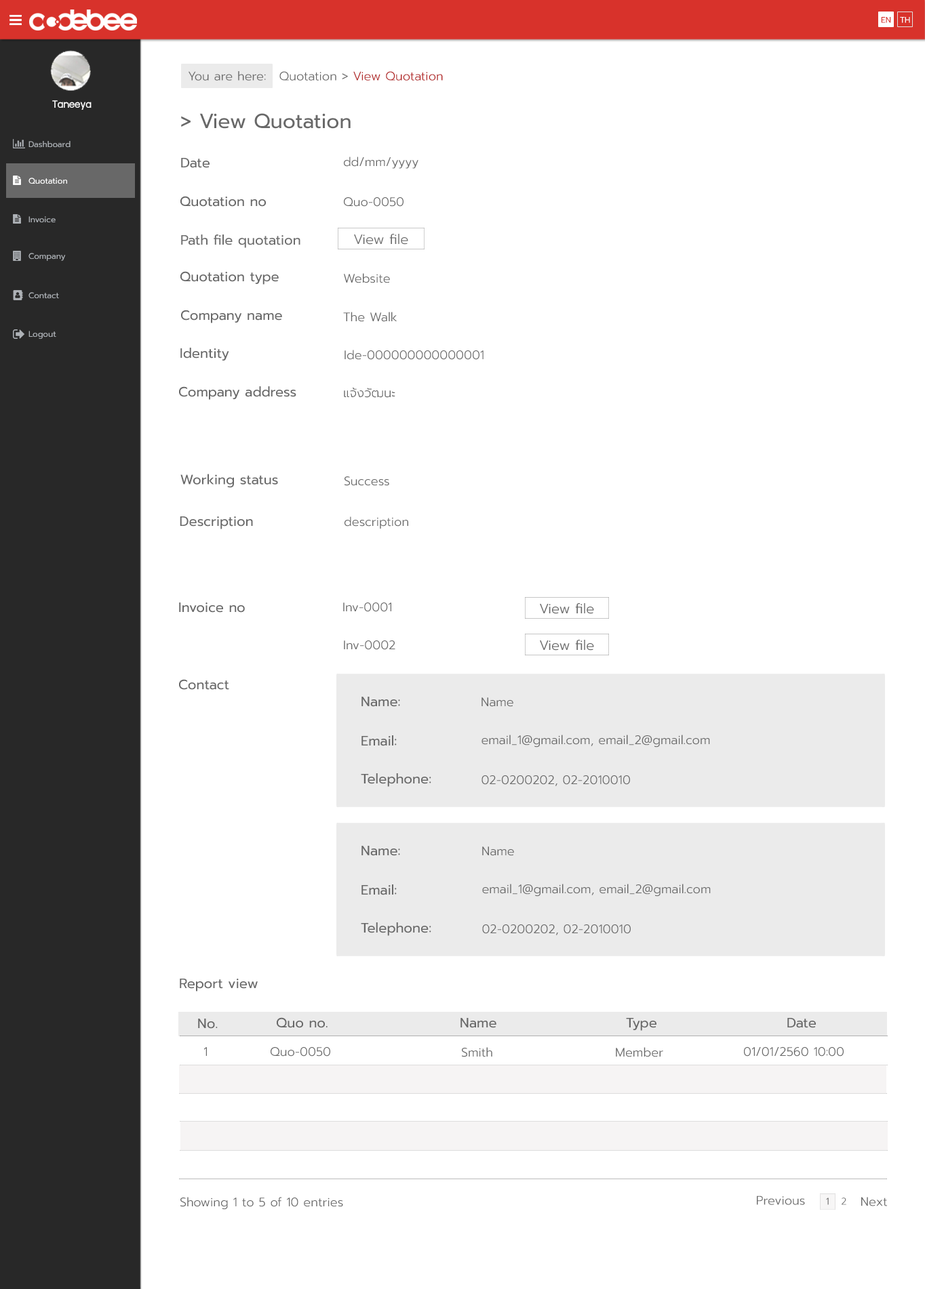
<style>
.page{position:relative;width:925px;height:1289px;background:#ffffff}
.page>*{position:absolute;margin:0}
.t1{font:8.1px "Prompt-Regular";color:#d8322b}
.t2{font:8.1px "Prompt-Regular";color:#ffffff}
.t3{font:12.2px "Prompt-Light";color:#686868}
.t4{font:12.2px "Prompt-Light";color:#b22121}
.t5{font:12.2px "supermarket";color:#ffffff}
.t6{font:20.3px "Prompt-Regular";color:#686868}
.t7{font:8.1px "Prompt-Regular";color:#aeb2b7}
.t8{font:13.6px "Prompt-Regular";color:#686868}
.t9{font:13.6px "Prompt-Light";color:#686868}
.t10{font:9.5px "Prompt-Light";color:#686868}
</style>
<div class="page">
<p class="t1" style="left:881px;top:17px;width:10px;height:6px">EN</p>
<p class="t2" style="left:900px;top:17px;width:10px;height:6px">TH</p>
<p class="t3" style="left:188px;top:71px;width:78px;height:10px">You are here:</p>
<p class="t4" style="left:279px;top:71px;width:164px;height:10px"><span class="t3">Quotation &gt; </span>View Quotation</p>
<p class="t5" style="left:52px;top:100px;width:40px;height:10px">Taneeya</p>
<p class="t6" style="left:181px;top:113px;width:170px;height:16px">&gt; View Quotation</p>
<p class="t7" style="left:28px;top:141px;width:43px;height:7px">Dashboard</p>
<p class="t8" style="left:181px;top:158px;width:28px;height:10px">Date</p>
<p class="t3" style="left:344px;top:157px;width:74px;height:12px">dd/mm/yyyy</p>
<p class="t2" style="left:28px;top:178px;width:39px;height:6px">Quotation</p>
<p class="t8" style="left:180px;top:196px;width:86px;height:11px">Quotation no</p>
<p class="t3" style="left:344px;top:197px;width:59px;height:10px">Quo-0050</p>
<p class="t7" style="left:28px;top:216px;width:28px;height:7px">Invoice</p>
<p class="t9" style="left:354px;top:234px;width:54px;height:11px">View file</p>
<p class="t8" style="left:181px;top:235px;width:119px;height:13px">Path file quotation</p>
<p class="t7" style="left:28px;top:253px;width:38px;height:8px">Company</p>
<p class="t8" style="left:180px;top:271px;width:99px;height:14px">Quotation type</p>
<p class="t3" style="left:344px;top:273px;width:46px;height:10px">Website</p>
<p class="t7" style="left:28px;top:292px;width:31px;height:7px">Contact</p>
<p class="t8" style="left:181px;top:310px;width:101px;height:13px">Company name</p>
<p class="t3" style="left:343px;top:312px;width:54px;height:10px">The Walk</p>
<p class="t7" style="left:28px;top:331px;width:28px;height:8px">Logout</p>
<p class="t8" style="left:180px;top:348px;width:49px;height:13px">Identity</p>
<p class="t3" style="left:344px;top:350px;width:139px;height:10px">Ide-000000000000001</p>
<p class="t8" style="left:179px;top:386px;width:117px;height:14px">Company address</p>
<p class="t3" style="left:344px;top:388px;width:51px;height:10px">แจ้งวัฒนะ</p>
<p class="t8" style="left:180px;top:474px;width:98px;height:14px">Working status</p>
<p class="t3" style="left:344px;top:477px;width:45px;height:9px">Success</p>
<p class="t8" style="left:180px;top:517px;width:73px;height:12px">Description</p>
<p class="t3" style="left:344px;top:517px;width:64px;height:12px">description</p>
<p class="t8" style="left:179px;top:603px;width:66px;height:10px">Invoice no</p>
<p class="t3" style="left:343px;top:603px;width:48px;height:9px">Inv-0001</p>
<p class="t9" style="left:540px;top:603px;width:54px;height:11px">View file</p>
<p class="t3" style="left:344px;top:641px;width:51px;height:9px">Inv-0002</p>
<p class="t9" style="left:540px;top:640px;width:54px;height:11px">View file</p>
<p class="t8" style="left:179px;top:679px;width:50px;height:11px">Contact</p>
<p class="t8" style="left:361px;top:697px;width:39px;height:10px">Name:</p>
<p class="t3" style="left:481px;top:698px;width:32px;height:9px">Name</p>
<p class="t8" style="left:361px;top:736px;width:36px;height:10px">Email:</p>
<p class="t3" style="left:481px;top:735px;width:229px;height:13px">email_1@gmail.com, email_2@gmail.com</p>
<p class="t8" style="left:361px;top:774px;width:70px;height:13px">Telephone:</p>
<p class="t3" style="left:481px;top:776px;width:149px;height:10px">02-0200202, 02-2010010</p>
<p class="t8" style="left:361px;top:846px;width:39px;height:10px">Name:</p>
<p class="t3" style="left:482px;top:847px;width:32px;height:9px">Name</p>
<p class="t8" style="left:361px;top:885px;width:36px;height:11px">Email:</p>
<p class="t3" style="left:482px;top:884px;width:229px;height:13px">email_1@gmail.com, email_2@gmail.com</p>
<p class="t8" style="left:361px;top:923px;width:70px;height:13px">Telephone:</p>
<p class="t3" style="left:482px;top:925px;width:149px;height:11px">02-0200202, 02-2010010</p>
<p class="t8" style="left:180px;top:979px;width:78px;height:13px">Report view</p>
<p class="t8" style="left:198px;top:1019px;width:20px;height:10px">No.</p>
<p class="t8" style="left:277px;top:1018px;width:50px;height:10px">Quo no.</p>
<p class="t8" style="left:460px;top:1018px;width:36px;height:10px">Name</p>
<p class="t8" style="left:626px;top:1018px;width:30px;height:13px">Type</p>
<p class="t8" style="left:787px;top:1018px;width:29px;height:10px">Date</p>
<p class="t3" style="left:204px;top:1047px;width:3px;height:9px">1</p>
<p class="t3" style="left:271px;top:1047px;width:59px;height:10px">Quo-0050</p>
<p class="t3" style="left:462px;top:1047px;width:30px;height:11px">Smith</p>
<p class="t3" style="left:616px;top:1047px;width:47px;height:11px">Member</p>
<p class="t3" style="left:744px;top:1047px;width:99px;height:10px">01/01/2560 10:00</p>
<p class="t3" style="left:180px;top:1197px;width:163px;height:13px">Showing 1 to 5 of 10 entries</p>
<p class="t3" style="left:757px;top:1196px;width:48px;height:9px">Previous</p>
<p class="t10" style="left:826px;top:1198px;width:2px;height:7px">1</p>
<p class="t10" style="left:841px;top:1198px;width:5px;height:7px">2</p>
<p class="t3" style="left:861px;top:1197px;width:26px;height:10px">Next</p>
</div>
